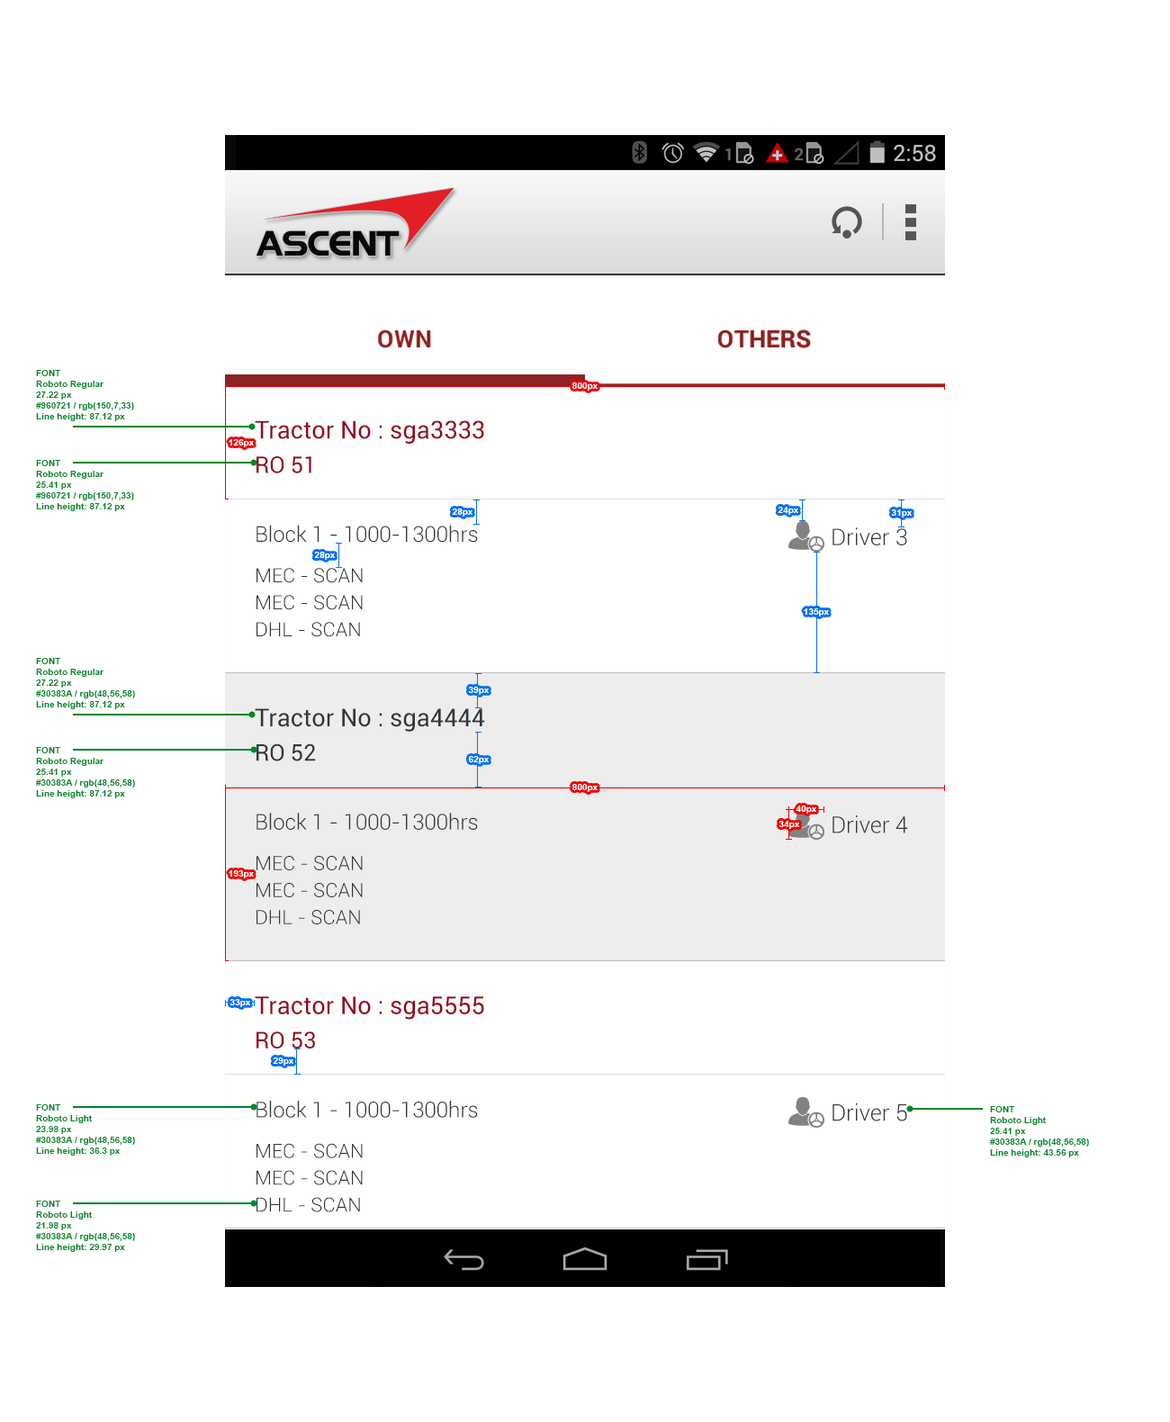
<style>
.page{position:relative;width:1170px;height:1422px;background:#ffffff}
.page>*{position:absolute;margin:0}
.t1{font:9px "Arial-BoldMT";color:#00872b}
.t2{font:9px "Arial-BoldMT";color:#ffffff}
.t3{font:24.5px "Roboto-Regular";color:#960721}
.t4{font:22.9px "Roboto-Regular";color:#960721}
.t5{font:21.6px "Roboto-Light";color:#30383a}
.t6{font:22.9px "Roboto-Light";color:#30383a}
.t7{font:19.8px/27px "Roboto-Light";color:#30383a}
.t8{font:24.5px "Roboto-Regular";color:#30383a}
.t9{font:22.9px "Roboto-Regular";color:#30383a}
</style>
<div class="page">
<p class="t1" style="left:36px;top:370px;width:98px;height:51px">FONT <br>Roboto Regular<br>27.22 px<br>#960721 / rgb(150,7,33)<br>Line height: 87.12 px</p>
<p class="t2" style="left:572px;top:382px;width:26px;height:9px">800px</p>
<p class="t3" style="left:255px;top:420px;width:229px;height:24px">Tractor No : sga3333</p>
<p class="t2" style="left:229px;top:439px;width:25px;height:8px">126px</p>
<p class="t1" style="left:36px;top:460px;width:98px;height:51px">FONT <br>Roboto Regular<br>25.41 px<br>#960721 / rgb(150,7,33)<br>Line height: 87.12 px</p>
<p class="t4" style="left:256px;top:456px;width:55px;height:17px">RO 51</p>
<p class="t2" style="left:452px;top:508px;width:20px;height:9px">28px</p>
<p class="t2" style="left:778px;top:507px;width:20px;height:8px">24px</p>
<p class="t2" style="left:891px;top:509px;width:21px;height:9px">31px</p>
<p class="t5" style="left:256px;top:525px;width:222px;height:18px">Block 1 - 1000-1300hrs</p>
<p class="t6" style="left:832px;top:527px;width:75px;height:18px">Driver 3</p>
<p class="t2" style="left:314px;top:552px;width:21px;height:8px">28px</p>
<p class="t7" style="left:256px;top:568px;width:107px;height:69px">MEC - SCAN<br>MEC - SCAN<br>DHL - SCAN</p>
<p class="t2" style="left:804px;top:608px;width:25px;height:8px">135px</p>
<p class="t1" style="left:36px;top:658px;width:99px;height:51px">FONT <br>Roboto Regular<br>27.22 px<br>#30383A / rgb(48,56,58)<br>Line height: 87.12 px</p>
<p class="t2" style="left:468px;top:687px;width:21px;height:8px">39px</p>
<p class="t8" style="left:255px;top:708px;width:230px;height:24px">Tractor No : sga4444</p>
<p class="t1" style="left:36px;top:747px;width:99px;height:51px">FONT <br>Roboto Regular<br>25.41 px<br>#30383A / rgb(48,56,58)<br>Line height: 87.12 px</p>
<p class="t9" style="left:256px;top:743px;width:60px;height:18px">RO 52</p>
<p class="t2" style="left:468px;top:756px;width:21px;height:8px">62px</p>
<p class="t2" style="left:572px;top:784px;width:26px;height:8px">800px</p>
<p class="t2" style="left:796px;top:806px;width:20px;height:8px">40px</p>
<p class="t5" style="left:256px;top:813px;width:222px;height:17px">Block 1 - 1000-1300hrs</p>
<p class="t2" style="left:778px;top:821px;width:21px;height:8px">34px</p>
<p class="t6" style="left:832px;top:815px;width:76px;height:18px">Driver 4</p>
<p class="t7" style="left:256px;top:856px;width:107px;height:68px">MEC - SCAN<br>MEC - SCAN<br>DHL - SCAN</p>
<p class="t2" style="left:229px;top:870px;width:25px;height:8px">193px</p>
<p class="t2" style="left:230px;top:999px;width:20px;height:8px">33px</p>
<p class="t3" style="left:255px;top:996px;width:229px;height:24px">Tractor No : sga5555</p>
<p class="t4" style="left:256px;top:1031px;width:59px;height:17px">RO 53</p>
<p class="t2" style="left:273px;top:1058px;width:20px;height:8px">29px</p>
<p class="t1" style="left:36px;top:1104px;width:99px;height:52px">FONT <br>Roboto Light<br>23.98 px<br>#30383A / rgb(48,56,58)<br>Line height: 36.3 px</p>
<p class="t5" style="left:256px;top:1101px;width:222px;height:17px">Block 1 - 1000-1300hrs</p>
<p class="t6" style="left:832px;top:1102px;width:75px;height:19px">Driver 5</p>
<p class="t1" style="left:990px;top:1106px;width:99px;height:51px">FONT <br>Roboto Light<br>25.41 px<br>#30383A / rgb(48,56,58)<br>Line height: 43.56 px</p>
<p class="t7" style="left:256px;top:1143px;width:107px;height:69px">MEC - SCAN<br>MEC - SCAN<br>DHL - SCAN</p>
<p class="t1" style="left:36px;top:1201px;width:99px;height:51px">FONT <br>Roboto Light<br>21.98 px<br>#30383A / rgb(48,56,58)<br>Line height: 29.97 px</p>
</div>
